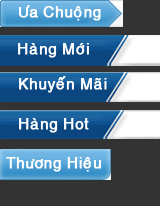
<style>
.page{position:relative;width:160px;height:206px;background:#333333}
.page>*{position:absolute;margin:0}
.t1{font:15px "VNI-Helve";color:#ffffff;font-weight:bold}
</style>
<div class="page">
<p class="t1" style="left:19px;top:5px;width:82px;height:16px">Öa Chuoäng</p>
<p class="t1" style="left:18px;top:43px;width:71px;height:15px">Haøng Môùi</p>
<p class="t1" style="left:19px;top:76px;width:88px;height:17px">Khuyeán Maõi</p>
<p class="t1" style="left:19px;top:118px;width:70px;height:15px">Haøng Hot</p>
<p class="t1" style="left:6px;top:157px;width:95px;height:15px">Thöông Hieäu</p>
</div>
